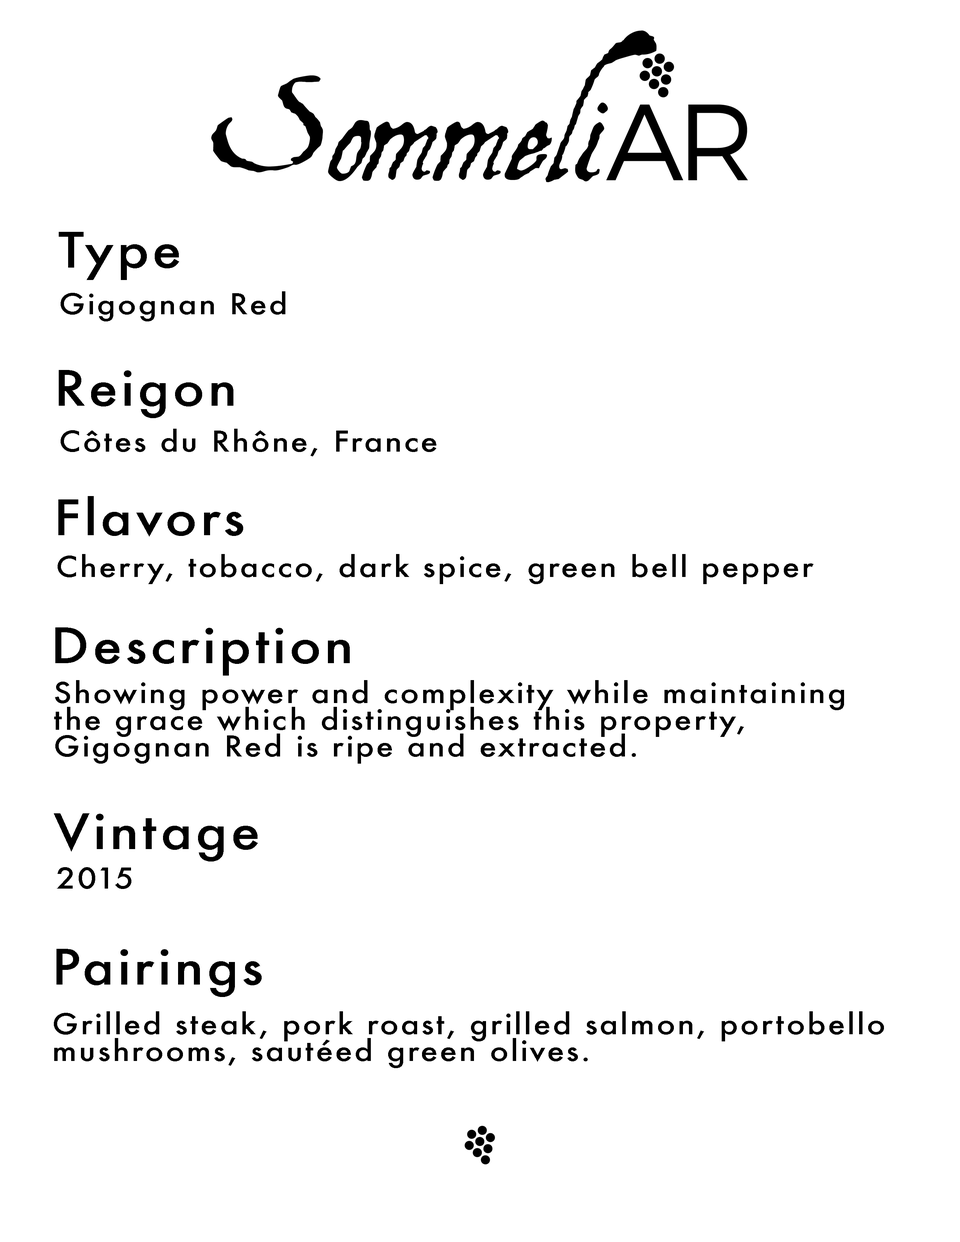
<style>
.page{position:relative;width:960px;height:1242px;background:#ffffff}
.page>*{position:absolute;margin:0}
.t1{font:47.5px "Futura-Medium";letter-spacing:0.06em;color:#000000;scale:1.12 1}
.t2{font:27.9px "Futura-Medium";letter-spacing:0.06em;color:#000000;scale:1.12 1}
.t3{font:27.9px/26.7px "Futura-Medium";letter-spacing:0.06em;color:#000000;scale:1.12 1}
</style>
<div class="page">
<p class="t1" style="left:59px;top:232px;width:120px;height:48px">Type</p>
<p class="t2" style="left:61px;top:291px;width:224px;height:30px">Gigognan Red</p>
<p class="t1" style="left:59px;top:370px;width:174px;height:48px">Reigon</p>
<p class="t2" style="left:61px;top:429px;width:375px;height:28px">Côtes du Rhône, France</p>
<p class="t1" style="left:58px;top:496px;width:185px;height:41px">Flavors</p>
<p class="t2" style="left:58px;top:554px;width:755px;height:30px">Cherry, tobacco, dark spice, green bell pepper</p>
<p class="t1" style="left:55px;top:628px;width:295px;height:48px">Description</p>
<p class="t3" style="left:54px;top:680px;width:790px;height:84px">Showing power and complexity while maintaining<br>the grace which distinguishes this property,<br>Gigognan Red is ripe and extracted.</p>
<p class="t1" style="left:54px;top:813px;width:204px;height:49px">Vintage</p>
<p class="t2" style="left:57px;top:867px;width:74px;height:22px">2015</p>
<p class="t1" style="left:56px;top:949px;width:206px;height:48px">Pairings</p>
<p class="t3" style="left:54px;top:1011px;width:830px;height:57px">Grilled steak, pork roast, grilled salmon, portobello<br>mushrooms, sautéed green olives.</p>
</div>
